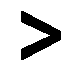
<style>
.page{position:relative;width:72px;height:72px;background:#ffffff}
.page>*{position:absolute;margin:0}
.t1{font:100px "ArialMT";color:#000000;font-weight:bold;scale:0.8 1}
</style>
<div class="page">
<p class="t1" style="left:21px;top:11px;width:40px;height:49px">&gt;</p>
</div>
